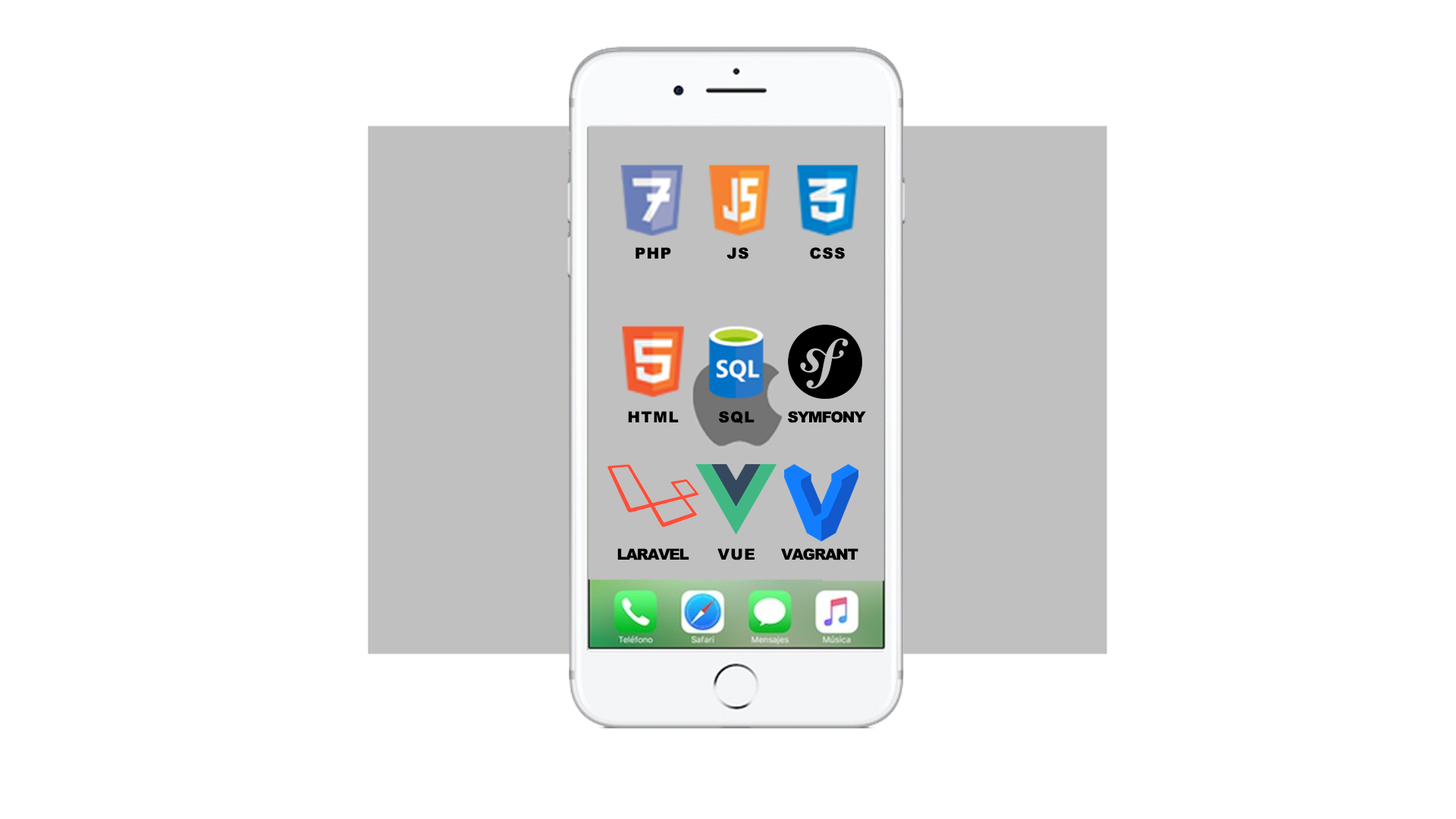
<style>
.page{position:relative;width:1456px;height:819px;background:#ffffff}
.page>*{position:absolute;margin:0}
.t1{font:15.2px "Arial-Black";letter-spacing:-0.2em;color:#000000}
</style>
<div class="page">
<p class="t1" style="left:635px;top:247px;width:36px;height:12px">P  H  P</p>
<p class="t1" style="left:726px;top:247px;width:22px;height:12px">J  S</p>
<p class="t1" style="left:810px;top:247px;width:35px;height:12px">C  S  S</p>
<p class="t1" style="left:628px;top:411px;width:51px;height:11px">H  T  M  L</p>
<p class="t1" style="left:719px;top:411px;width:36px;height:13px">S  Q  L</p>
<p class="t1" style="left:788px;top:411px;width:78px;height:12px">S Y M F O N Y</p>
<p class="t1" style="left:617px;top:548px;width:72px;height:12px">L A R A V E L</p>
<p class="t1" style="left:717px;top:548px;width:38px;height:12px">V  U  E</p>
<p class="t1" style="left:781px;top:548px;width:77px;height:12px">V A G R A N T</p>
</div>
